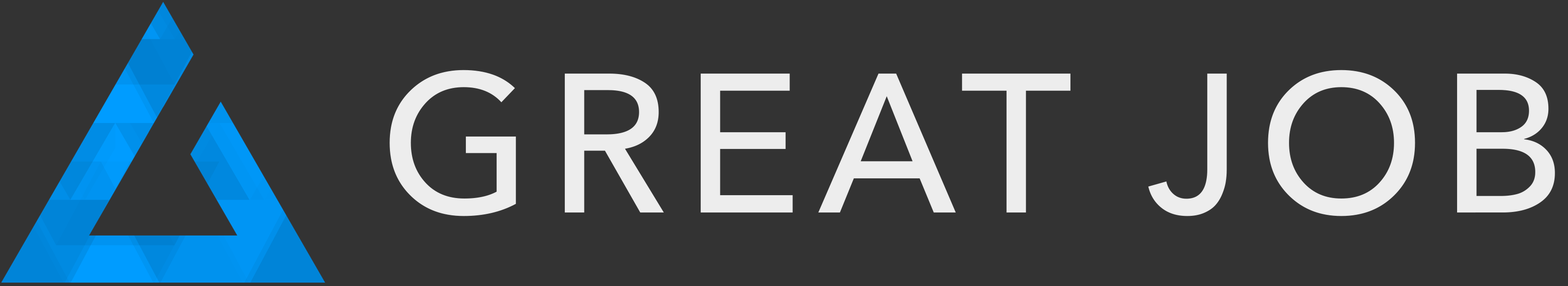
<style>
.page{position:relative;width:1568px;height:286px;background:#333333}
.page>*{position:absolute;margin:0}
.t1{font:195.9px "AvenirNextCyr-Medium";letter-spacing:0.08em;color:#ededed;text-transform:uppercase}
</style>
<div class="page">
<p class="t1" style="left:389px;top:70px;width:1166px;height:146px">Great Job</p>
</div>
